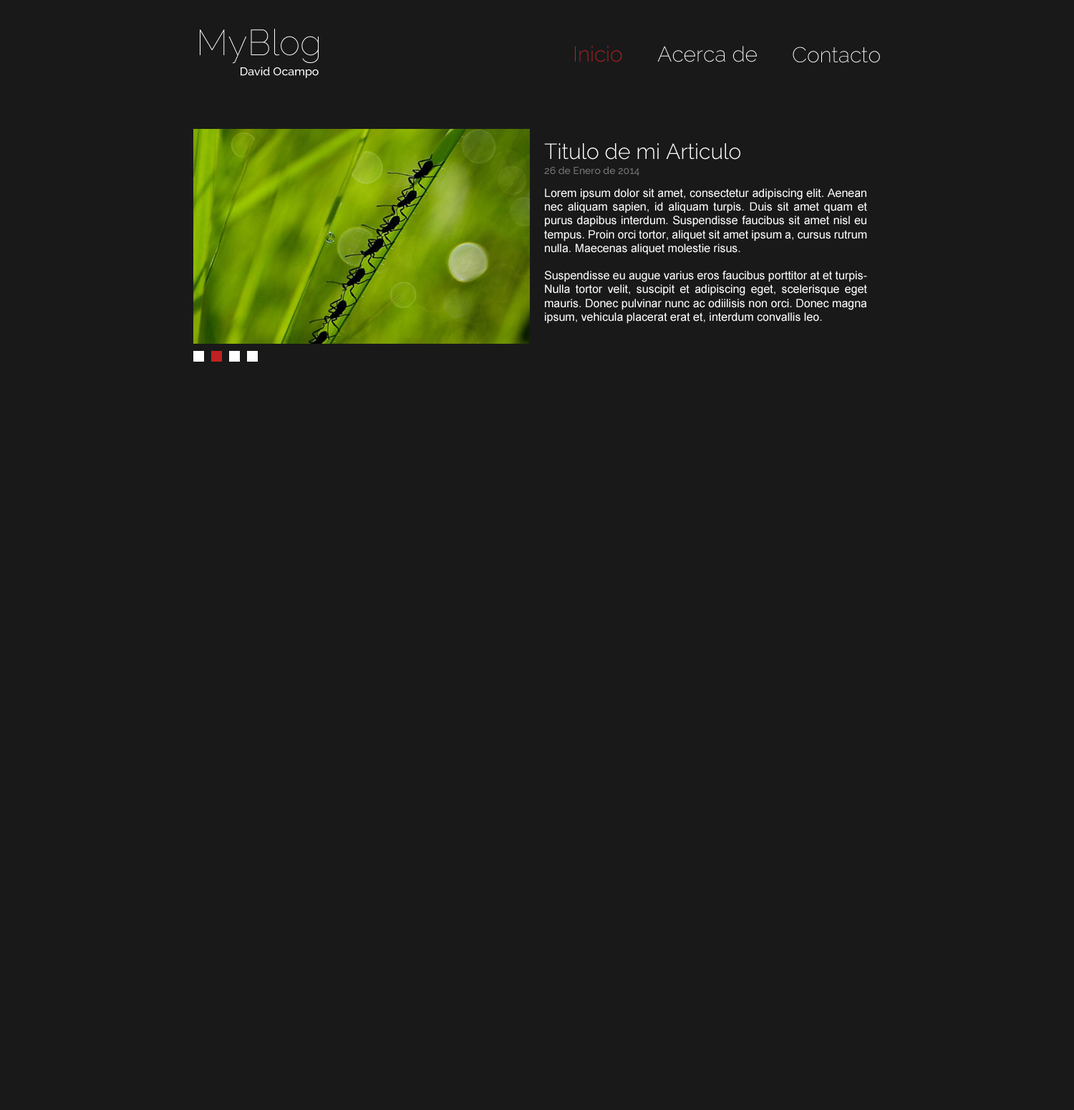
<style>
.page{position:relative;width:1074px;height:1110px;background:#191919}
.page>*{position:absolute;margin:0}
.t1{font:35.8px "Raleway-Thin";color:#ffffff}
.t2{font:21.5px "Raleway-ExtraLight";color:#bf2222}
.t3{font:21.5px "Raleway-ExtraLight";color:#feffff}
.t4{font:11.5px "Raleway-Medium";color:#feffff}
.t5{font:21.5px "Raleway-Light";color:#feffff}
.t6{font:10px "Raleway-Medium";color:#777777}
.t7{font:11.5px "ArialMT";color:#feffff}
</style>
<div class="page">
<p class="t1" style="left:200px;top:29px;width:119px;height:35px">MyBlog</p>
<p class="t2" style="left:575px;top:46px;width:47px;height:16px">Inicio</p>
<p class="t3" style="left:657px;top:46px;width:100px;height:16px">Acerca de</p>
<p class="t3" style="left:793px;top:47px;width:87px;height:16px">Contacto</p>
<p class="t4" style="left:241px;top:67px;width:78px;height:11px">David Ocampo</p>
<p class="t5" style="left:544px;top:143px;width:197px;height:17px">Titulo de mi Articulo</p>
<p class="t6" style="left:544px;top:166px;width:96px;height:9px">26 de Enero de 2014</p>
<p class="t7" style="left:544px;top:188px;width:323px;height:136px;text-align:justify">Lorem ipsum dolor sit amet, consectetur adipiscing elit. Aenean nec aliquam sapien, id aliquam turpis. Duis sit amet quam et purus dapibus interdum. Suspendisse faucibus sit amet nisl eu tempus. Proin orci tortor, aliquet sit amet ipsum a, cursus rutrum nulla. Maecenas aliquet molestie risus.<br><br>Suspendisse eu augue varius eros faucibus porttitor at et turpisNulla tortor velit, suscipit et adipiscing eget, scelerisque eget mauris. Donec pulvinar nunc ac odiilisis non orci. Donec magna ipsum, vehicula placerat erat et, interdum convallis leo.</p>
</div>
